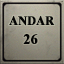
<style>
.page{position:relative;width:64px;height:64px}
.page>*{position:absolute;margin:0}
.t1{font:12.7px "TimesNewRomanPS-BoldMT";letter-spacing:0.005em;color:#040404;text-transform:uppercase;font-weight:bold;scale:0.95 1}
.t2{font:14.3px "TimesNewRomanPS-BoldMT";letter-spacing:0.005em;color:#040404;text-transform:uppercase;font-weight:bold;scale:0.97 1}
</style>
<div class="page">
<p class="t1" style="left:9px;top:16px;width:46px;height:10px">andar</p>
<p class="t2" style="left:23px;top:34px;width:15px;height:10px">26</p>
</div>
